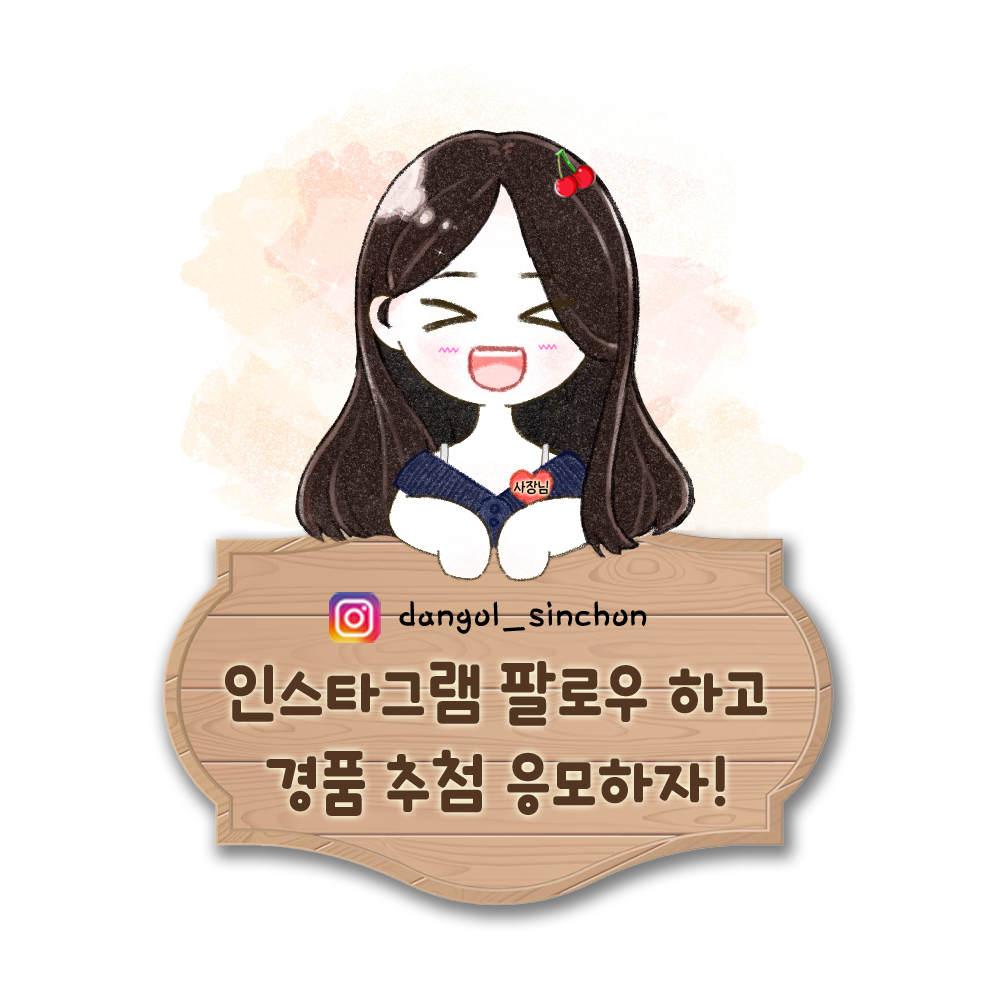
<style>
.page{position:relative;width:1000px;height:1000px;background:#ffffff}
.page>*{position:absolute;margin:0}
.t1{font:15px "THEMiss";color:#000000}
.t2{font:45px "Pix_HUFriend132";color:#000000}
.t3{font:70px "icTTHayanbunpilB";color:#533621}
</style>
<div class="page">
<p class="t1" style="left:513px;top:480px;width:36px;height:15px">사장님</p>
<p class="t2" style="left:399px;top:601px;width:248px;height:33px">dangol_sinchon</p>
<p class="t3" style="left:225px;top:661px;width:542px;height:65px">인스타그램 팔로우 하고</p>
<p class="t3" style="left:266px;top:749px;width:460px;height:67px">경품 추첨 응모하자!</p>
</div>
